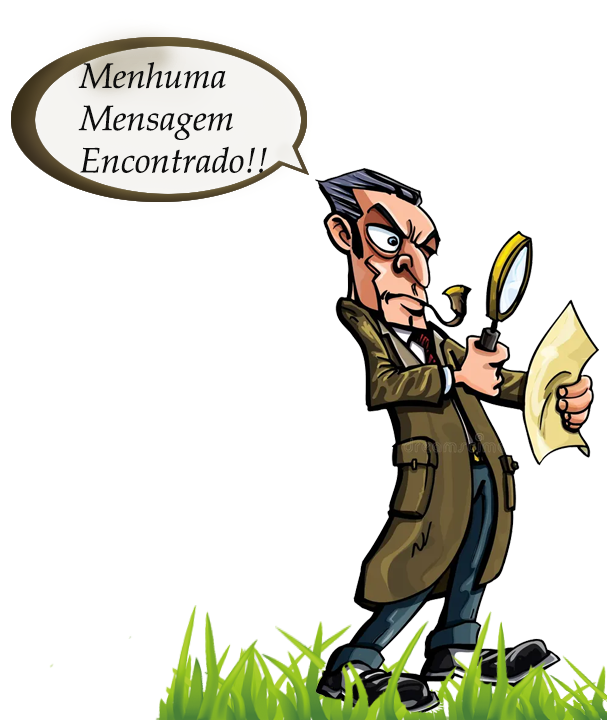
<style>
.page{position:relative;width:607px;height:720px;background:#ffffff}
.page>*{position:absolute;margin:0}
.t1{font:35.2px "BookAntiqua-Italic";color:#0e0e0e}
</style>
<div class="page">
<p class="t1" style="left:78px;top:62px;width:189px;height:111px">Menhuma <br>Mensagem<br>Encontrado!!</p>
</div>
